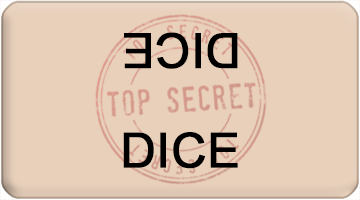
<style>
.page{position:relative;width:360px;height:200px;background:#e8d0bb}
.page>*{position:absolute;margin:0}
.t1{font:48px "ArialMT";color:#000000;font-weight:bold}
</style>
<div class="page">
<p class="t1" style="left:124px;top:32px;width:114px;height:37px;rotate:180deg">DICE</p>
<p class="t1" style="left:123px;top:132px;width:115px;height:37px">DICE</p>
</div>
